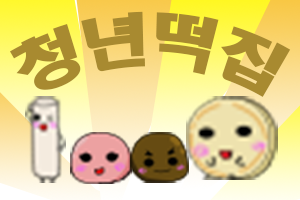
<style>
.page{position:relative;width:300px;height:200px}
.page>*{position:absolute;margin:0}
.t1{font:58px "HeadlineR-HM";color:#a88a30}
</style>
<div class="page">
<p class="t1" style="left:10px;top:11px;width:281px;height:86px">청년떡집</p>
</div>
